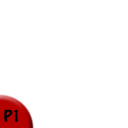
<style>
.page{position:relative;width:128px;height:128px;background:#ffffff}
.page>*{position:absolute;margin:0}
.t1{font:14px "HoboStd";color:#000000}
</style>
<div class="page">
<p class="t1" style="left:4px;top:109px;width:14px;height:13px">P1</p>
</div>
